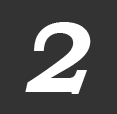
<style>
.page{position:relative;width:117px;height:114px;background:#333333}
.page>*{position:absolute;margin:0}
.t1{font:100px "BookmanOldStyle-BoldItalic";color:#ffffff}
</style>
<div class="page">
<p class="t1" style="left:25px;top:22px;width:66px;height:72px">2</p>
</div>
